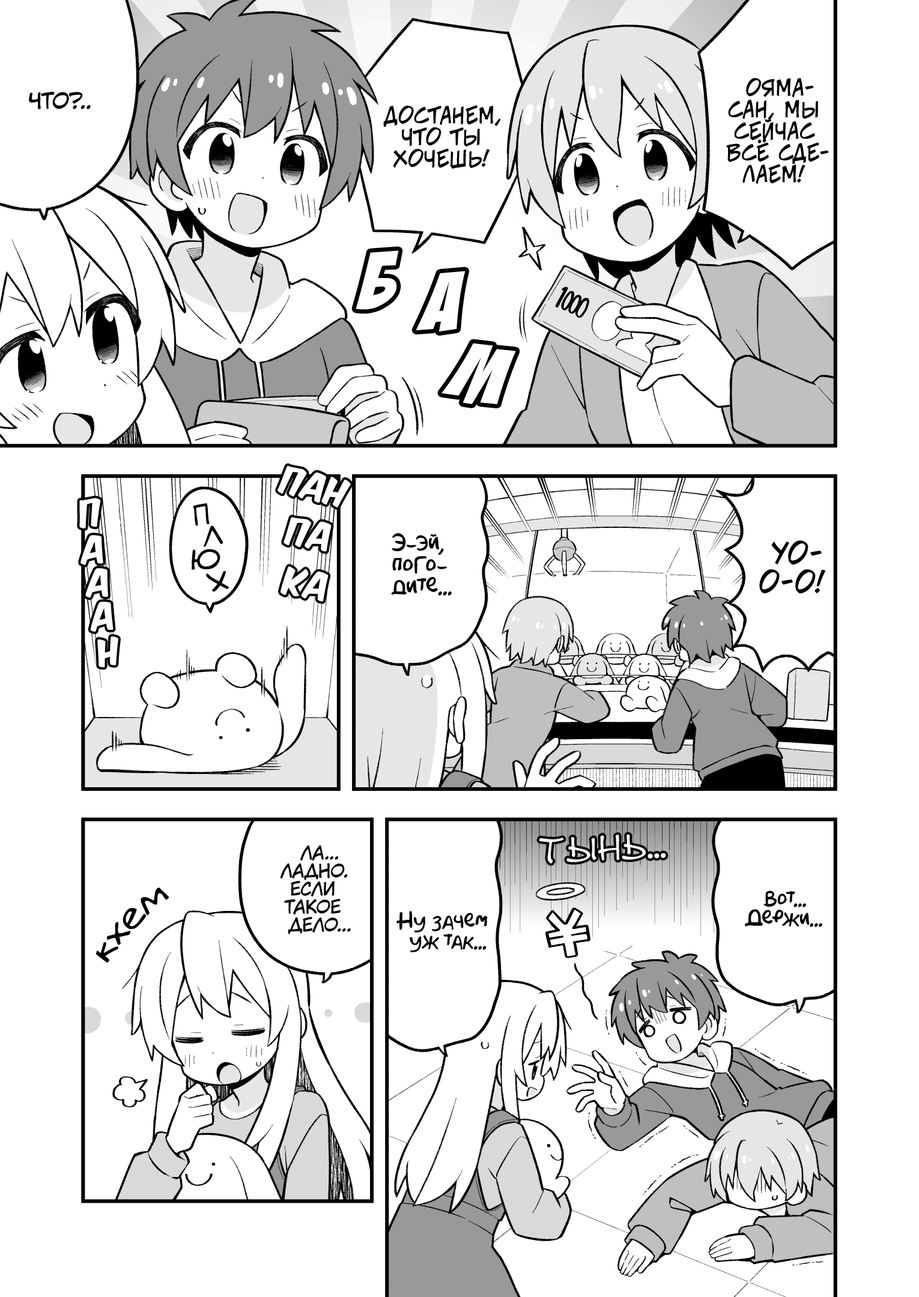
<style>
.page{position:relative;width:919px;height:1297px;background:#ffffff}
.page>*{position:absolute;margin:0}
.t1{font:21.6px "v_CCJeffCampbell";color:#000000;text-transform:uppercase}
.t2{font:21.6px "KuraiVoice2";color:#000000;text-transform:uppercase}
.t3{font:90.1px "BadaBoom";letter-spacing:0.05em;color:#ffffff}
.t4{font:32.4px "KomikaTitle-AxisRUS-LAT";color:#ffffff}
.t5{font:27px "v_Augie";color:#000000;text-transform:uppercase;font-weight:bold}
.t6{font:21.6px "AkbarPlain";color:#000000}
.t7{font:28.8px "v_CCJeffCampbell";color:#000000;text-transform:uppercase}
.t8{font:18px "KuraiVoice2";color:#000000;text-transform:uppercase}
.t9{font:36px "DSNote";color:#ffffff;font-weight:bold}
.t10{font:28.8px "DSNote";color:#ffffff;font-weight:bold}
.t11{font:36px "v_Augie";color:#000000}
.t12{font:19.8px "AkbarPlain";color:#000000}
</style>
<div class="page">
<p class="t1" style="left:726px;top:78px;width:103px;height:106px;text-align:center">Ояма-<br>сан, мы<br>сейчас<br>всё сде-<br>лаем!</p>
<p class="t2" style="left:29px;top:92px;width:62px;height:17px">Что?..</p>
<p class="t1" style="left:383px;top:105px;width:118px;height:64px;text-align:center">Достанем,<br>что ты<br>хочешь!</p>
<p class="t3" style="left:356px;top:250px;width:43px;height:60px;rotate:6deg">б</p>
<p class="t3" style="left:416px;top:271px;width:50px;height:61px;rotate:5deg">а</p>
<p class="t3" style="left:442px;top:343px;width:74px;height:61px;rotate:16deg">м</p>
<p class="t4" style="left:278px;top:466px;width:73px;height:42px;rotate:14deg">пан</p>
<p class="t4" style="left:79px;top:498px;width:22px;height:31px;rotate:-8deg">п</p>
<p class="t5" style="left:193px;top:503px;width:17px;height:23px;rotate:-7deg">п</p>
<p class="t4" style="left:284px;top:517px;width:48px;height:35px;rotate:9deg">па</p>
<p class="t5" style="left:204px;top:526px;width:19px;height:21px">л</p>
<p class="t6" style="left:391px;top:533px;width:61px;height:63px;text-align:center">Э-эй,<br>пого-<br>дите...</p>
<p class="t4" style="left:80px;top:535px;width:23px;height:30px;rotate:-5deg">а</p>
<p class="t7" style="left:759px;top:541px;width:67px;height:53px;text-align:center">Уо-<br>о-о!</p>
<p class="t5" style="left:192px;top:549px;width:28px;height:21px">ю</p>
<p class="t4" style="left:85px;top:568px;width:23px;height:30px;rotate:-3deg">а</p>
<p class="t4" style="left:281px;top:566px;width:48px;height:36px;rotate:10deg">ка</p>
<p class="t5" style="left:206px;top:571px;width:23px;height:21px">х</p>
<p class="t4" style="left:90px;top:602px;width:24px;height:30px;rotate:-7deg">а</p>
<p class="t4" style="left:97px;top:637px;width:21px;height:31px;rotate:-11deg">н</p>
<p class="t8" style="left:280px;top:845px;width:71px;height:90px;text-align:center">Ла...<br>Ладно.<br>Если<br>такое<br>дело...</p>
<p class="t9" style="left:539px;top:834px;width:127px;height:30px;rotate:-3deg">тынь<span class="t10">...</span></p>
<p class="t11" style="left:96px;top:888px;width:73px;height:75px;rotate:-45deg">кхем</p>
<p class="t12" style="left:745px;top:891px;width:77px;height:36px;text-align:center">Вот...<br>Держи...</p>
<p class="t12" style="left:396px;top:911px;width:92px;height:42px;text-align:center">Ну зачем<br>уж так...</p>
</div>
